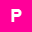
<style>
.page{position:relative;width:32px;height:32px;background:#ff0099}
.page>*{position:absolute;margin:0}
.t1{font:18px "Arial-BoldMT";color:#ffffff}
</style>
<div class="page">
<p class="t1" style="left:11px;top:9px;width:11px;height:13px">P</p>
</div>
